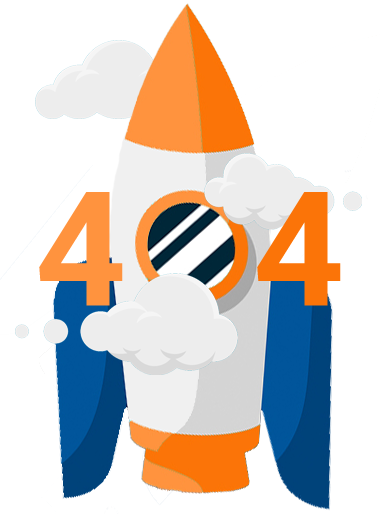
<style>
.page{position:relative;width:380px;height:514px;background:#ffffff}
.page>*{position:absolute;margin:0}
.t1{font:159.2px "Roboto-Bold";color:#ff933e}
.t2{font:159.2px "Roboto-Bold";color:#fb7408}
</style>
<div class="page">
<p class="t1" style="left:39px;top:192px;width:84px;height:114px">4</p>
<p class="t2" style="left:257px;top:192px;width:84px;height:114px">4</p>
</div>
